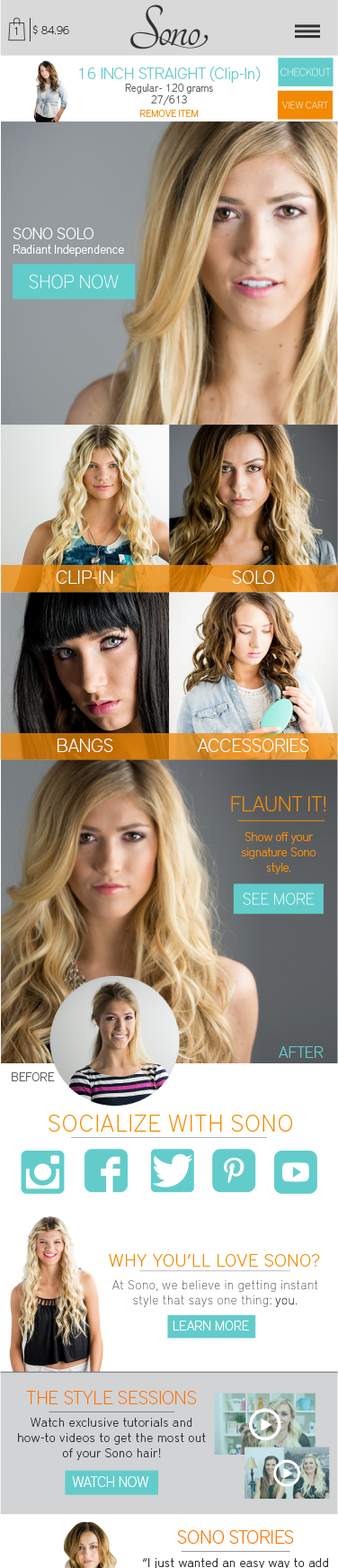
<style>
.page{position:relative;width:338px;height:1568px}
.page>*{position:absolute;margin:0}
.t1{font:11.2px "DistrictPro-Thin";color:#323232}
.t2{font:16.2px "DistrictPro-Thin";color:#65cbc9}
.t3{font:10.8px/11.7px "DistrictPro-Thin";color:#5f6062}
.t4{font:9.9px "DistrictPro-Thin";color:#f38b00}
.t5{font:12.6px "DistrictPro-Thin";color:#ffffff}
.t6{font:16.2px "DistrictPro-Thin";color:#ffffff}
.t7{font:18.9px "DistrictPro-Thin";color:#ffffff}
.t8{font:12.6px "DistrictPro-Thin";color:#f38b00}
.t9{font:21.6px "DistrictPro-Thin";color:#f38b00}
.t10{font:12.6px "DistrictPro-Thin";color:#5f6062}
.t11{font:23.5px "DistrictPro-Thin";letter-spacing:0.05em;color:#f38b00}
.t12{font:17.8px "DistrictPro-Thin";letter-spacing:0.05em;color:#f38b00}
.t13{font:13.5px "DistrictPro-Thin";color:#ffffff}
.t14{font:18.9px "DistrictPro-Thin";color:#ff7400}
.t15{font:12.6px "DistrictPro-Thin";letter-spacing:0.05em;color:#323232}
.t16{font:14.3px "DistrictPro-Thin";color:#ffffff}
</style>
<div class="page">
<p class="t1" style="left:14px;top:27px;width:4px;height:8px">1</p>
<p class="t1" style="left:32px;top:24px;width:37px;height:11px">$ 84.96</p>
<p class="t2" style="left:79px;top:67px;width:182px;height:16px">16 INCH STRAIGHT (Clip-In)</p>
<p class="t3" style="left:125px;top:84px;width:88px;height:21px;text-align:center">Regular - 120 grams<br>27/613</p>
<p class="t4" style="left:140px;top:110px;width:59px;height:7px">REMOVE ITEM</p>
<p class="t5" style="left:13px;top:228px;width:111px;height:28px"><span class="t6">SONO SOLO<br></span>Radiant Independence</p>
<p class="t7" style="left:57px;top:570px;width:56px;height:14px">CLIP-IN</p>
<p class="t7" style="left:232px;top:570px;width:42px;height:14px">SOLO</p>
<p class="t7" style="left:58px;top:739px;width:55px;height:13px">BANGS</p>
<p class="t7" style="left:198px;top:739px;width:111px;height:13px">ACCESSORIES</p>
<p class="t8" style="left:231px;top:796px;width:96px;height:78px;text-align:center"><span class="t9">FLAUNT IT!<br></span><br>Show off your signature Sono style.</p>
<p class="t2" style="left:279px;top:1046px;width:45px;height:12px">AFTER</p>
<p class="t10" style="left:12px;top:1072px;width:43px;height:9px">BEFORE</p>
<p class="t11" style="left:49px;top:1115px;width:243px;height:17px">SOCIALIZE WITH SONO</p>
<p class="t12" style="left:109px;top:1254px;width:211px;height:13px">WHY YOU’LL LOVE SONO?</p>
<p class="t13" style="left:173px;top:1321px;width:76px;height:10px">LEARN MORE</p>
<p class="t14" style="left:26px;top:1391px;width:170px;height:13px">THE STYLE SESSIONS</p>
<p class="t15" style="left:18px;top:1418px;width:188px;height:42px;text-align:center">Watch exclusive tutorials and how-to videos to get the most out of your Sono hair!</p>
<p class="t16" style="left:72px;top:1476px;width:76px;height:11px">WATCH NOW</p>
<p class="t14" style="left:177px;top:1530px;width:117px;height:14px">SONO STORIES</p>
</div>
